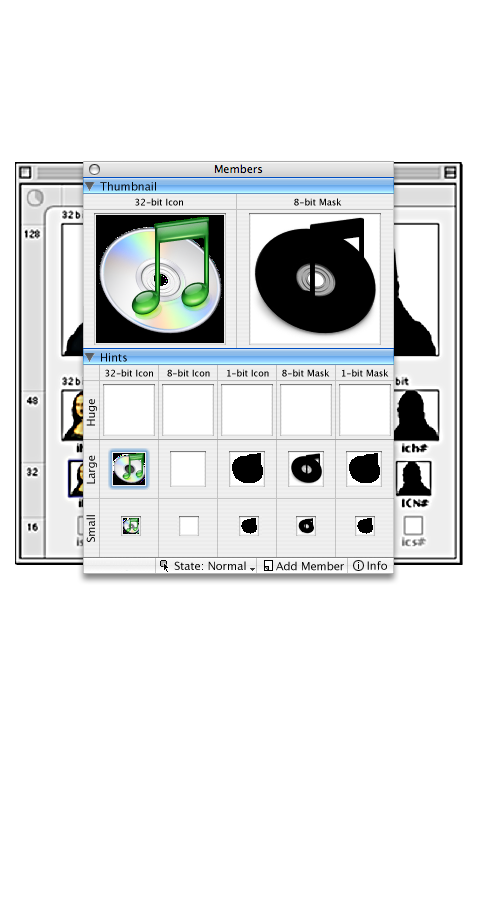
<style>
.page{position:relative;width:500px;height:900px;background:#ffffff}
.page>*{position:absolute;margin:0}
.t1{font:11px "LucidaGrande";color:#000000}
.t2{font:9px "LucidaGrande";color:#000000}
.t3{font:11px "LucidaGrande"}
</style>
<div class="page">
<p class="t1" style="left:100px;top:182px;width:56px;height:9px">Thumbnail</p>
<p class="t2" style="left:135px;top:198px;width:48px;height:8px">32-bit Icon</p>
<p class="t2" style="left:294px;top:198px;width:48px;height:8px">8-bit Mask</p>
<p class="t1" style="left:101px;top:353px;width:26px;height:9px">Hints</p>
<p class="t2" style="left:105px;top:369px;width:48px;height:8px">32-bit Icon</p>
<p class="t2" style="left:167px;top:369px;width:43px;height:8px">8-bit Icon</p>
<p class="t2" style="left:227px;top:369px;width:42px;height:8px">1-bit Icon</p>
<p class="t2" style="left:282px;top:369px;width:48px;height:8px">8-bit Mask</p>
<p class="t2" style="left:342px;top:369px;width:47px;height:8px">1-bit Mask</p>
<p class="t1" style="left:86px;top:399px;width:11px;height:27px;rotate:-90deg">Huge</p>
<p class="t3" style="left:86px;top:455px;width:11px;height:29px;rotate:-90deg">Large</p>
<p class="t1" style="left:86px;top:515px;width:9px;height:27px;rotate:-90deg">Small</p>
<p class="t1" style="left:174px;top:561px;width:72px;height:9px">State: Normal</p>
<p class="t1" style="left:276px;top:561px;width:68px;height:10px">Add Member</p>
<p class="t1" style="left:367px;top:561px;width:20px;height:9px">Info</p>
</div>
